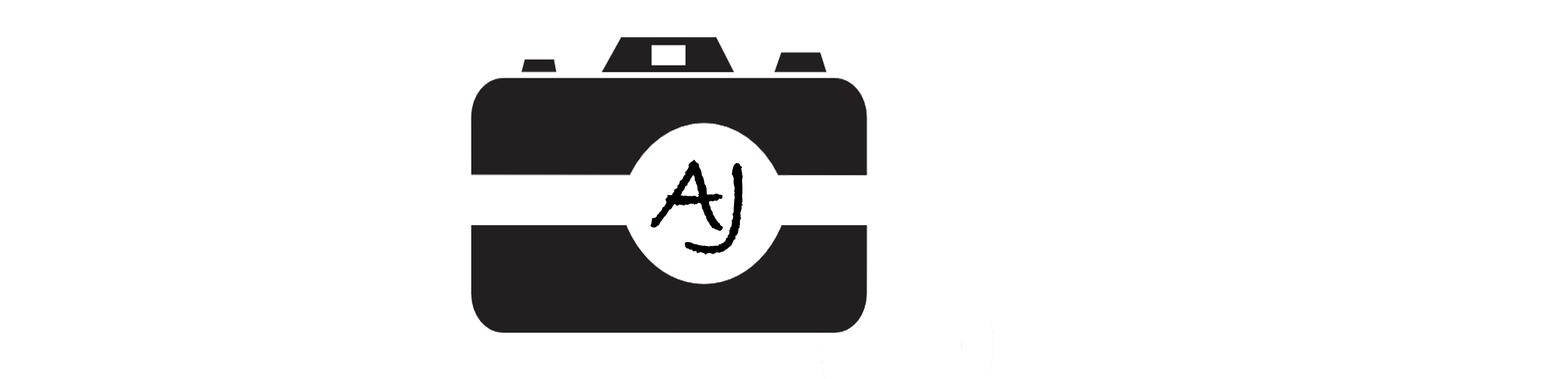
<style>
.page{position:relative;width:1568px;height:379px;background:#ffffff}
.page>*{position:absolute;margin:0}
.t1{font:116.1px "BradleyHandITCTT-Bold";color:#000000;scale:0.82 1}
</style>
<div class="page">
<p class="t1" style="left:650px;top:160px;width:93px;height:95px">AJ</p>
</div>
